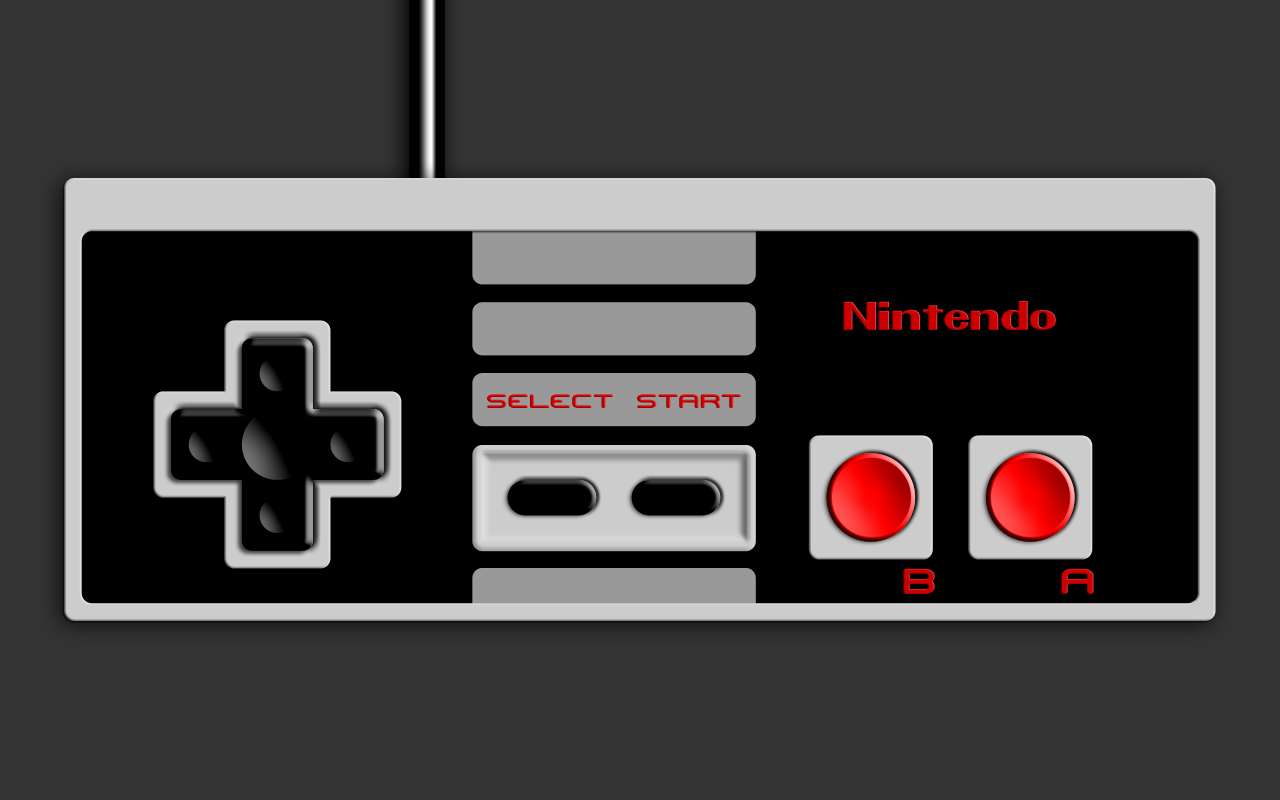
<style>
.page{position:relative;width:1280px;height:800px;background:#333333}
.page>*{position:absolute;margin:0}
.t1{font:36px "Pretendo";color:#cc0000;scale:1.13 1}
.t2{font:19.4px "MishmashBRK";scale:1.42 1}
.t3{font:36px "MishmashBRK";color:#cc0000;scale:1.24 1}
.t4{font:36px "MishmashBRK";color:#cc0000;scale:1.28 1}
</style>
<div class="page">
<p class="t1" style="left:843px;top:301px;width:213px;height:29px">Nintendo</p>
<p class="t2" style="left:487px;top:394px;width:254px;height:14px">SELECT START</p>
<p class="t3" style="left:903px;top:568px;width:32px;height:26px">B</p>
<p class="t4" style="left:1061px;top:568px;width:33px;height:26px">A</p>
</div>
